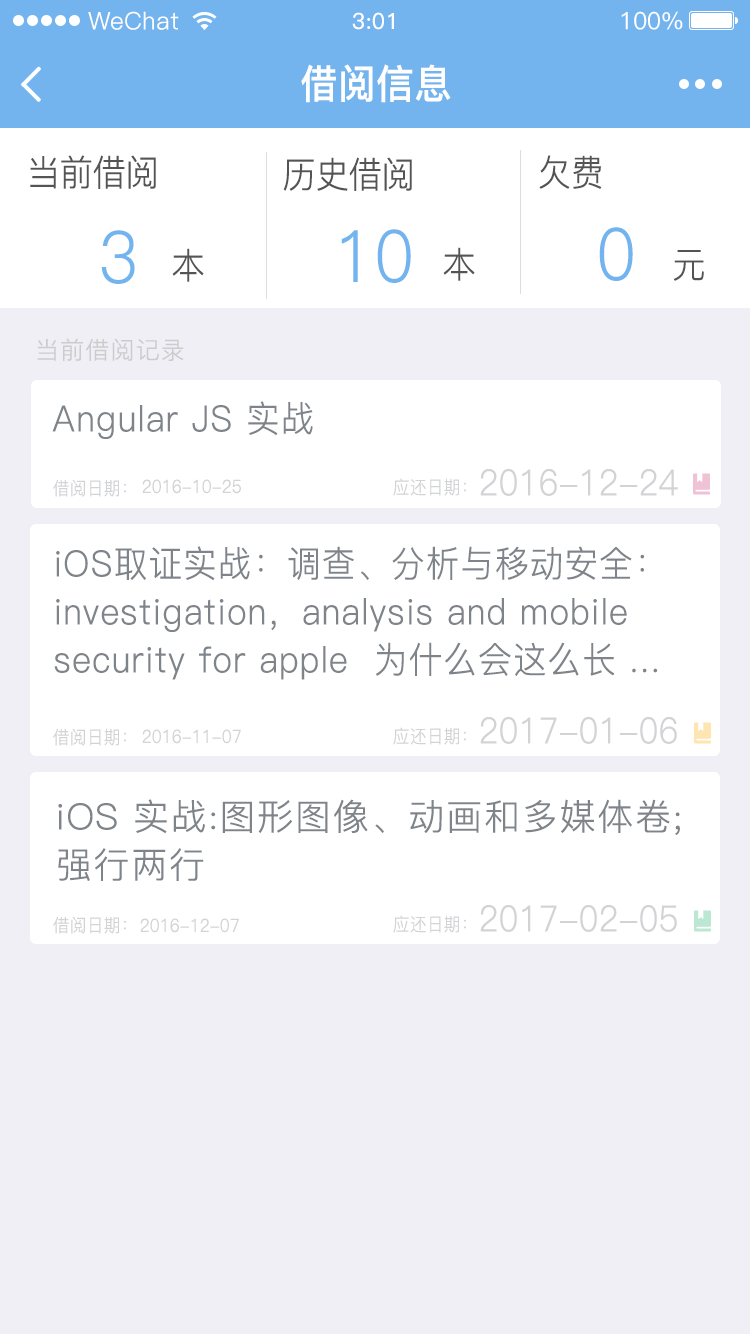
<style>
.page{position:relative;width:750px;height:1334px;background:#ffffff}
.page>*{position:absolute;margin:0}
.t1{font:24px "PingFang-SC-Regular";color:#ffffff}
.t2{font:22px "PingFang-SC-Medium";color:#ffffff}
.t3{font:24px "PingFang-SC-Medium";letter-spacing:-0.02em;color:#ffffff}
.t4{font:40px "PingFang-SC-Bold";color:#ffffff;scale:0.93 1}
.t5{font:36px "PingFang-SC-Regular";color:#545454;scale:0.93 1}
.t6{font:72px "PingFang-SC-Regular";color:#73b4ef;scale:0.93 1}
.t7{font:24px "PingFang-SC-Regular";letter-spacing:0.05em;color:#cccccc}
.t8{font:36px "PingFang-SC-Regular";letter-spacing:0.05em;color:#7f848a;scale:0.93 1}
.t9{font:36px "PingFang-SC-Regular";color:#d2d3d5;scale:0.93 1}
.t10{font:18px "PingFang-SC-Regular";color:#d2d3d5;scale:0.93 1}
.t11{font:36px/48px "PingFang-SC-Regular";letter-spacing:0.05em;color:#7f848a;scale:0.93 1}
.t12{font:36px/48px "PingFang-SC-Regular";letter-spacing:0.05em;color:#7f848a}
</style>
<div class="page">
<p class="t1" style="left:88px;top:11px;width:91px;height:19px">WeChat</p>
<p class="t2" style="left:352px;top:12px;width:42px;height:18px">3:01</p>
<p class="t3" style="left:621px;top:11px;width:62px;height:19px">100%</p>
<p class="t4" style="left:301px;top:64px;width:150px;height:39px">借阅信息</p>
<p class="t5" style="left:30px;top:155px;width:126px;height:34px">当前借阅</p>
<p class="t5" style="left:283px;top:157px;width:129px;height:34px">历史借阅</p>
<p class="t5" style="left:539px;top:155px;width:63px;height:34px">欠费</p>
<p class="t6" style="left:101px;top:230px;width:34px;height:54px">3</p>
<p class="t6" style="left:341px;top:229px;width:70px;height:54px">10</p>
<p class="t6" style="left:599px;top:227px;width:34px;height:54px">0</p>
<p class="t5" style="left:172px;top:248px;width:32px;height:34px">本</p>
<p class="t5" style="left:443px;top:247px;width:32px;height:34px">本</p>
<p class="t5" style="left:673px;top:250px;width:31px;height:31px">元</p>
<p class="t7" style="left:37px;top:338px;width:147px;height:23px">当前借阅记录</p>
<p class="t8" style="left:52px;top:401px;width:261px;height:38px">Angular JS 实战</p>
<p class="t9" style="left:480px;top:469px;width:198px;height:27px">2016-12-24</p>
<p class="t10" style="left:53px;top:479px;width:73px;height:18px">借阅日期：</p>
<p class="t10" style="left:142px;top:479px;width:99px;height:15px">2016-10-25</p>
<p class="t10" style="left:393px;top:478px;width:73px;height:18px">应还日期：</p>
<p class="t11" style="left:54px;top:546px;width:604px;height:134px">iOS取证实战：调查、分析与移动安全：investigation，analysis and mobile security for apple  为什么会这么长 ...</p>
<p class="t9" style="left:480px;top:717px;width:197px;height:27px">2017-01-06</p>
<p class="t10" style="left:53px;top:728px;width:73px;height:18px">借阅日期：</p>
<p class="t10" style="left:142px;top:729px;width:99px;height:15px">2016-11-07</p>
<p class="t10" style="left:393px;top:727px;width:73px;height:18px">应还日期：</p>
<p class="t12" style="left:58px;top:799px;width:622px;height:82px">iOS 实战:图形图像、动画和多媒体卷;强行两行</p>
<p class="t9" style="left:480px;top:905px;width:197px;height:27px">2017-02-05</p>
<p class="t10" style="left:53px;top:916px;width:73px;height:18px">借阅日期：</p>
<p class="t10" style="left:140px;top:918px;width:99px;height:15px">2016-12-07</p>
<p class="t10" style="left:393px;top:915px;width:73px;height:18px">应还日期：</p>
</div>
